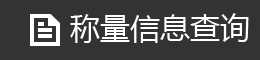
<style>
.page{position:relative;width:260px;height:60px;background:#333333}
.page>*{position:absolute;margin:0}
.t1{font:30px "MicrosoftYaHei";color:#ffffff}
</style>
<div class="page">
<p class="t1" style="left:70px;top:13px;width:179px;height:30px">称量信息查询</p>
</div>
